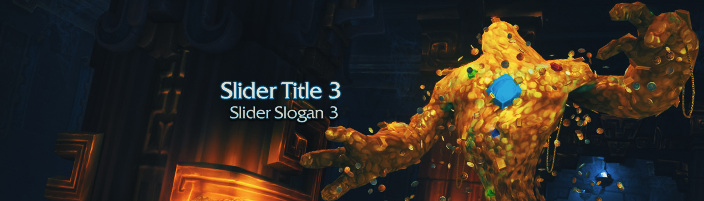
<style>
.page{position:relative;width:704px;height:201px}
.page>*{position:absolute;margin:0}
.t1{font:22.8px "BlizQuadrataWeb";color:#e2e2e2}
.t2{font:16.8px "BlizQuadrataWeb";color:#cecec5}
</style>
<div class="page">
<p class="t1" style="left:221px;top:82px;width:120px;height:17px">Slider Title 3</p>
<p class="t2" style="left:230px;top:106px;width:108px;height:17px">Slider Slogan 3</p>
</div>
